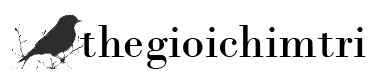
<style>
.page{position:relative;width:386px;height:73px;background:#ffffff}
.page>*{position:absolute;margin:0}
.t1{font:48px "BodoniMT";color:#000000}
</style>
<div class="page">
<p class="t1" style="left:80px;top:25px;width:286px;height:44px">thegioichimtri</p>
</div>
